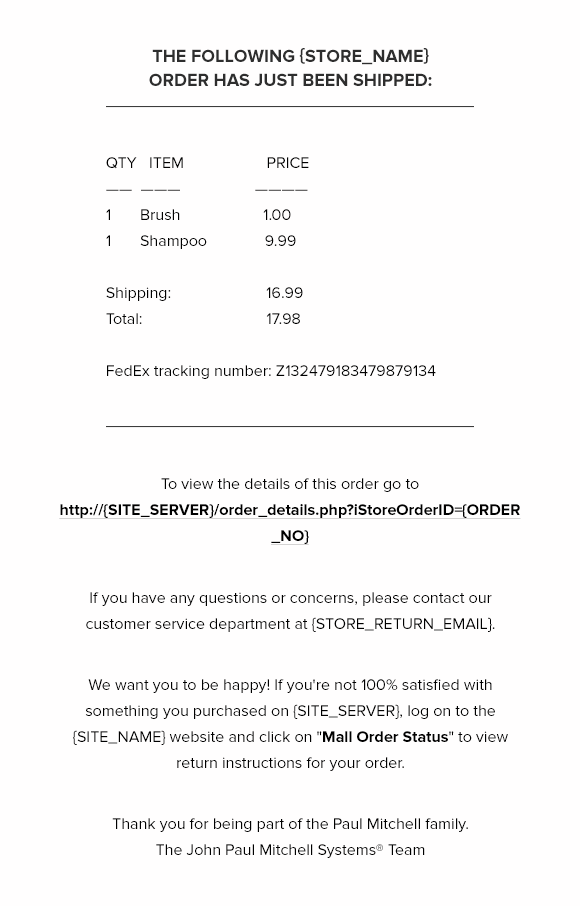
<style>
.page{position:relative;width:580px;height:906px;background:#fffefe}
.page>*{position:absolute;margin:0}
.t1{font:18px/24px "ProximaNova-Bold";color:#2e2e2e;text-transform:uppercase}
.t2{font:16px/26px "ProximaNova-Regular";color:#000000}
.t3{font:16px/26px "ProximaNova-Bold";color:#000000;text-decoration:underline}
.t4{font:16px/26px "ProximaNova-Bold";color:#000000}
</style>
<div class="page">
<p class="t1" style="left:149px;top:48px;width:283px;height:38px;text-align:center">The following {STORE_NAME} order has just been shipped:</p>
<p class="t2" style="left:106px;top:157px;width:330px;height:222px">QTY   ITEM                    PRICE <br>——  ———                  ———— <br>1       Brush                    1.00<br>1       Shampoo              9.99<br><br>Shipping:                       16.99<br>Total:                              17.98<br><br>FedEx tracking number: Z132479183479879134</p>
<p class="t3" style="left:59px;top:478px;width:462px;height:67px;text-align:center"><span class="t2">To view the details of this order go to </span>http://{SITE_SERVER}/order_details.php?iStoreOrderID={ORDER_NO}</p>
<p class="t2" style="left:86px;top:592px;width:409px;height:40px;text-align:center">If you have any questions or concerns, please contact our customer service department at {STORE_RETURN_EMAIL}.</p>
<p class="t2" style="left:73px;top:679px;width:435px;height:92px;text-align:center">We want you to be happy! If you're not 100% satisfied with something you purchased on {SITE_SERVER}, log on to the {SITE_NAME} website and click on "<span class="t4">Mall Order Status</span>" to view return instructions for your order.</p>
<p class="t2" style="left:112px;top:818px;width:356px;height:40px;text-align:center">Thank you for being part of the Paul Mitchell family.<br>The John Paul Mitchell Systems® Team</p>
</div>
